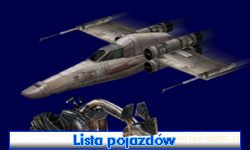
<style>
.page{position:relative;width:250px;height:150px;background:#000048}
.page>*{position:absolute;margin:0}
.t1{font:14px "FuturaBT-Heavy";color:#004be5}
.t2{font:9px "ArialMT";color:#fff0c6}
</style>
<div class="page">
<p class="t1" style="left:74px;top:134px;width:101px;height:14px">Lista pojazdow</p>
<p class="t2" style="left:169px;top:134px;width:70px;height:9px">www.jedi.delart.pl</p>
</div>
